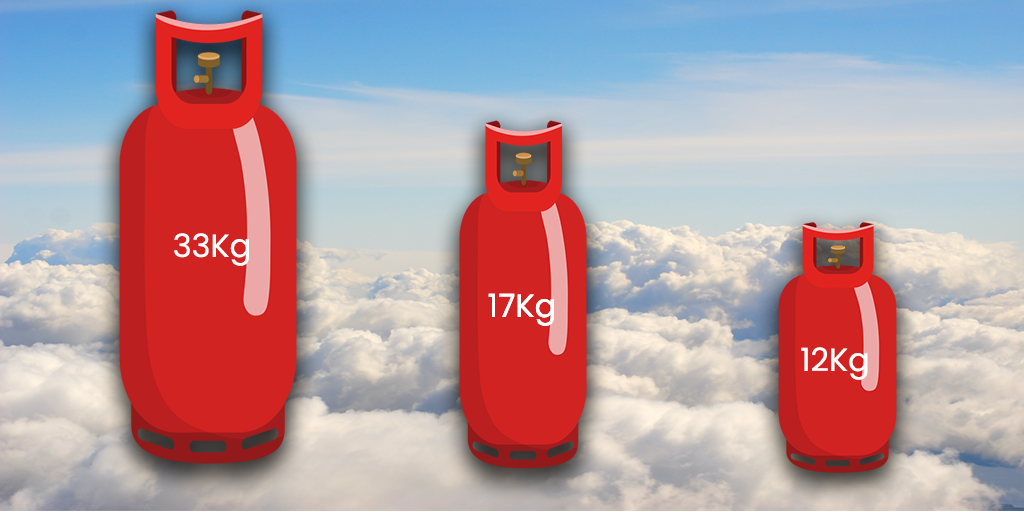
<style>
.page{position:relative;width:1024px;height:512px}
.page>*{position:absolute;margin:0}
.t1{font:32px "Poppins-Regular";color:#ffffff}
</style>
<div class="page">
<p class="t1" style="left:174px;top:233px;width:75px;height:33px">33Kg</p>
<p class="t1" style="left:488px;top:293px;width:66px;height:33px">17Kg</p>
<p class="t1" style="left:488px;top:293px;width:66px;height:33px">17Kg</p>
<p class="t1" style="left:801px;top:347px;width:67px;height:33px">12Kg</p>
</div>
